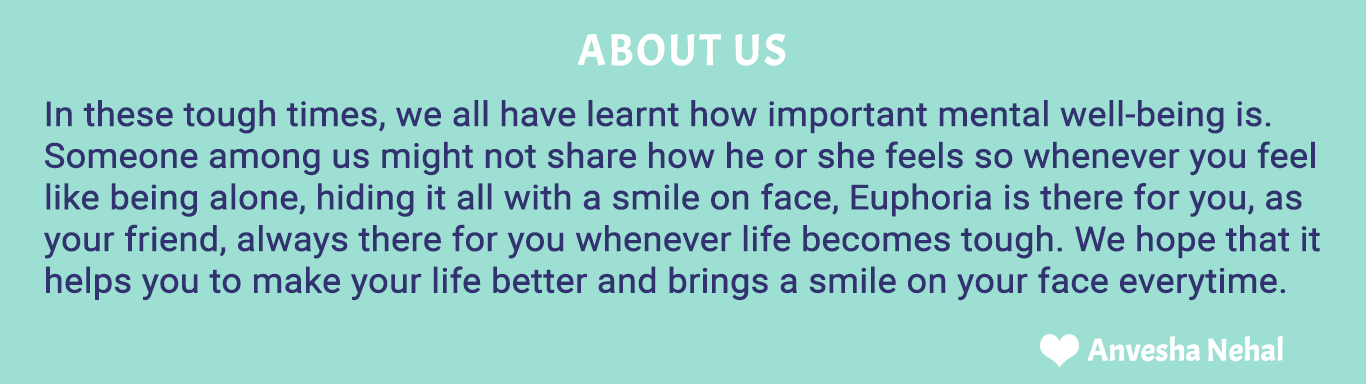
<style>
.page{position:relative;width:1366px;height:384px;background:#9ddfd3}
.page>*{position:absolute;margin:0}
.t1{font:44.2px "Acme-Regular";letter-spacing:0.03em;color:#ffffff;font-weight:bold}
.t2{font:34.2px/41.7px "Roboto-Regular";letter-spacing:-0.015em;color:#31326f;font-weight:bold;scale:1.05 1}
.t3{font:31.4px "Acme-Regular";letter-spacing:-0.03em;color:#ffffff;font-weight:bold;scale:1.05 1}
</style>
<div class="page">
<p class="t1" style="left:577px;top:33px;width:209px;height:33px">ABOUT US</p>
<p class="t2" style="left:44px;top:100px;width:1276px;height:201px">In these tough times, we all have learnt how important mental well-being is.<br>Someone among us might not share how he or she feels so whenever you feel <br>like being alone, hiding it all with a smile on face, Euphoria is there for you, as<br>your friend, always there for you whenever life becomes tough. We hope that it<br>helps you to make your life better and brings a smile on your face everytime.</p>
<p class="t3" style="left:1087px;top:336px;width:196px;height:26px">Anvesha Nehal</p>
</div>
